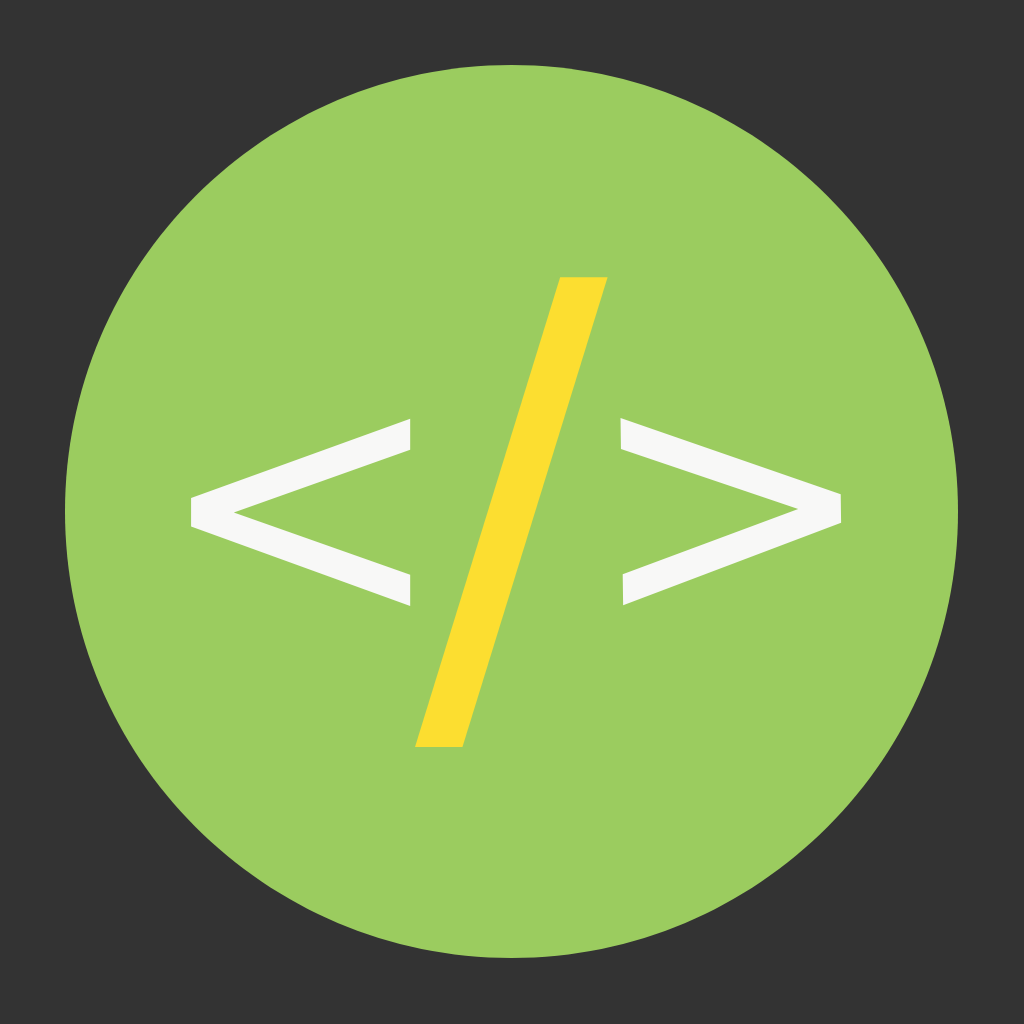
<style>
.page{position:relative;width:1024px;height:1024px;background:#9bcc5f}
.page>*{position:absolute;margin:0}
.t1{font:571.6px "DejaVuSans";color:#fcde30}
.t2{font:350px "DejaVuSans";color:#f8f8f7}
</style>
<div class="page">
<p class="t1" style="left:415px;top:277px;width:193px;height:470px">/</p>
<p class="t2" style="left:191px;top:418px;width:220px;height:188px">&lt;</p>
<p class="t2" style="left:620px;top:418px;width:222px;height:188px;rotate:179deg">&lt;</p>
</div>
